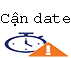
<style>
.page{position:relative;width:71px;height:58px;background:#ffffff}
.page>*{position:absolute;margin:0}
.t1{font:16px "CourierNewPSMT";letter-spacing:-0.005em;color:#000000}
</style>
<div class="page">
<p class="t1" style="left:1px;top:12px;width:69px;height:14px">Cận date</p>
</div>
